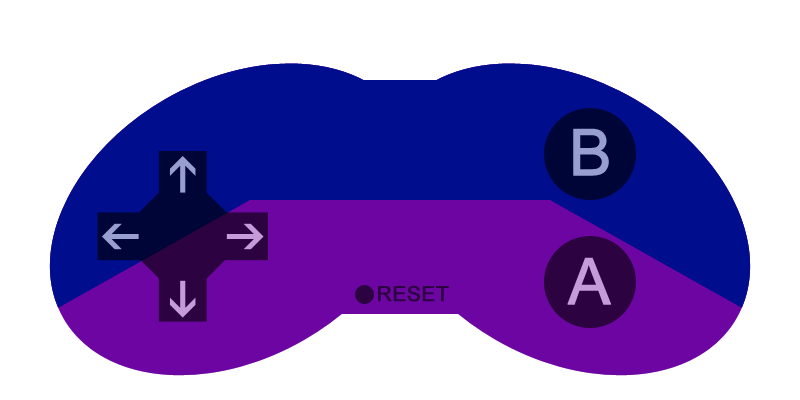
<style>
.page{position:relative;width:800px;height:400px;background:#ffffff}
.page>*{position:absolute;margin:0}
.t1{font:64.1px "ArialMT";color:#999ed1;text-transform:uppercase;font-weight:bold}
.t2{font:64.1px "ArialMT";color:#c59bda;text-transform:uppercase;font-weight:bold}
.t3{font:20.9px "ArialMT";color:#2c0241;text-transform:uppercase;font-weight:bold}
</style>
<div class="page">
<p class="t1" style="left:573px;top:128px;width:36px;height:48px">B</p>
<p class="t2" style="left:567px;top:257px;width:44px;height:48px">A</p>
<p class="t3" style="left:378px;top:285px;width:71px;height:17px">RESET</p>
</div>
